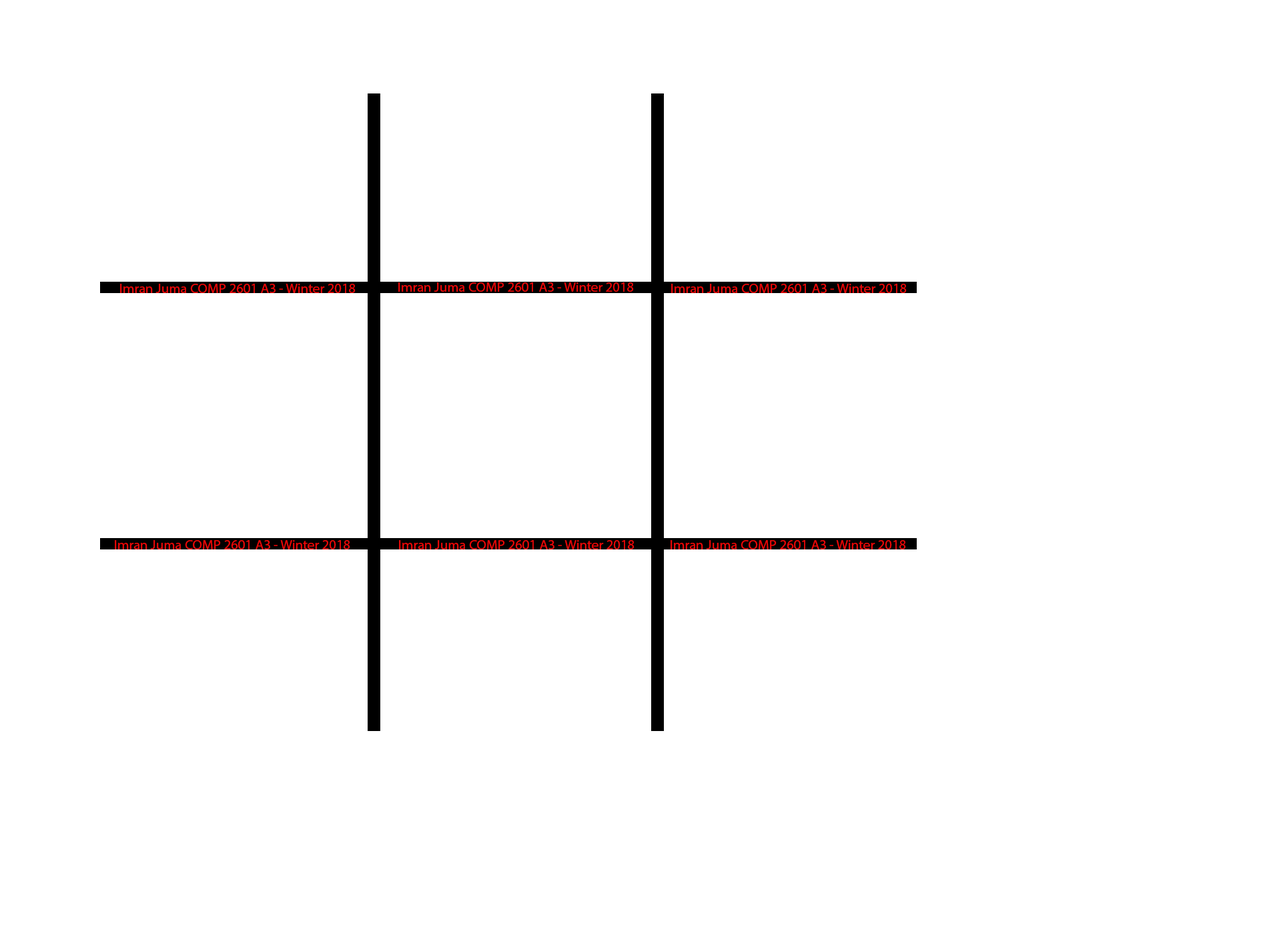
<style>
.page{position:relative;width:1261px;height:946px;background:#ffffff}
.page>*{position:absolute;margin:0}
.t1{font:13.9px "MyriadPro-Regular";color:#ee0707}
</style>
<div class="page">
<p class="t1" style="left:120px;top:284px;width:236px;height:9px">Imran Juma COMP 2601 A3 - Winter 2018</p>
<p class="t1" style="left:398px;top:282px;width:236px;height:10px">Imran Juma COMP 2601 A3 - Winter 2018</p>
<p class="t1" style="left:671px;top:284px;width:236px;height:9px">Imran Juma COMP 2601 A3 - Winter 2018</p>
<p class="t1" style="left:115px;top:540px;width:235px;height:9px">Imran Juma COMP 2601 A3 - Winter 2018</p>
<p class="t1" style="left:399px;top:540px;width:236px;height:9px">Imran Juma COMP 2601 A3 - Winter 2018</p>
<p class="t1" style="left:671px;top:540px;width:235px;height:9px">Imran Juma COMP 2601 A3 - Winter 2018</p>
</div>
